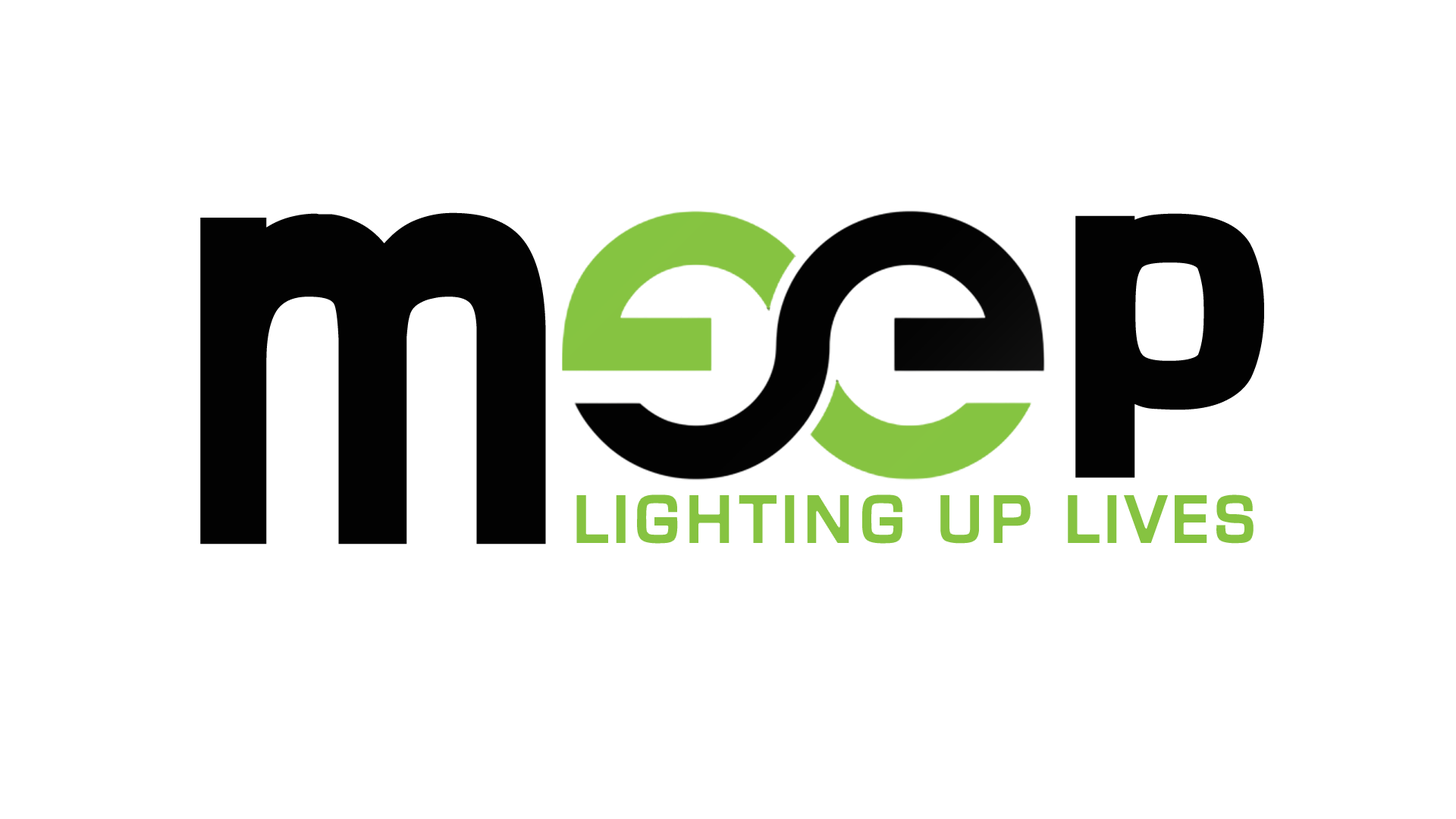
<style>
.page{position:relative;width:1456px;height:819px;background:#ffffff}
.page>*{position:absolute;margin:0}
.t1{font:663.1px "WaukeganLDOBlack";letter-spacing:0.075em;color:#020202;scale:0.75 1}
.t2{font:389.5px "WaukeganLDOBlack";letter-spacing:0.075em;color:#020202;scale:1.11 1}
.t3{font:73.2px "WaukeganLDOBlack";letter-spacing:0.075em;color:#86c341}
</style>
<div class="page">
<p class="t1" style="left:200px;top:212px;width:346px;height:332px">m</p>
<p class="t2" style="left:1075px;top:213px;width:189px;height:265px">p</p>
<p class="t3" style="left:576px;top:494px;width:678px;height:50px">LIGHTING UP LIVES</p>
</div>
